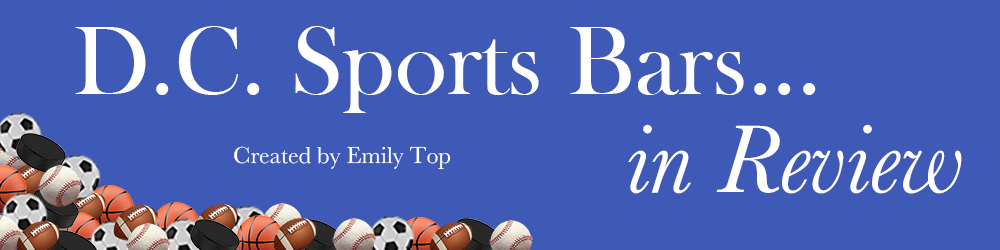
<style>
.page{position:relative;width:1000px;height:250px;background:#3e5ab6}
.page>*{position:absolute;margin:0}
.t1{font:100px "BaskOldFace";color:#ffffff}
.t2{font:100px "Baskerville-Italic";color:#ffffff}
.t3{font:24px "Baskerville";color:#ffffff}
</style>
<div class="page">
<p class="t1" style="left:75px;top:26px;width:741px;height:87px">D.C. Sports Bars...</p>
<p class="t2" style="left:628px;top:124px;width:334px;height:70px">in Review</p>
<p class="t3" style="left:234px;top:146px;width:217px;height:24px">Created by Emily Top</p>
</div>
